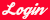
<style>
.page{position:relative;width:50px;height:20px;background:#fb042d}
.page>*{position:absolute;margin:0}
.t1{font:12px "Streetwear";color:#faf8f8}
</style>
<div class="page">
<p class="t1" style="left:2px;top:2px;width:46px;height:17px">Login</p>
</div>
